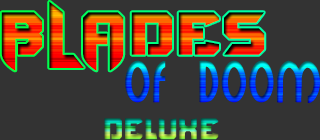
<style>
.page{position:relative;width:320px;height:140px;background:#333333}
.page>*{position:absolute;margin:0}
.t1{font:58.4px "BravoDestroyerPersonalUSE-regular";letter-spacing:0.025em}
.t2{font:45.9px "Minerva";letter-spacing:0.025em}
.t3{font:28.9px "BravoDestroyerPersonalUSE-regular";letter-spacing:0.025em;scale:0.89 1}
</style>
<div class="page">
<p class="t1" style="left:1px;top:1px;width:264px;height:70px">BLADES</p>
<p class="t2" style="left:125px;top:60px;width:195px;height:43px">OF DOOM</p>
<p class="t3" style="left:104px;top:118px;width:115px;height:22px">Deluxe</p>
</div>
